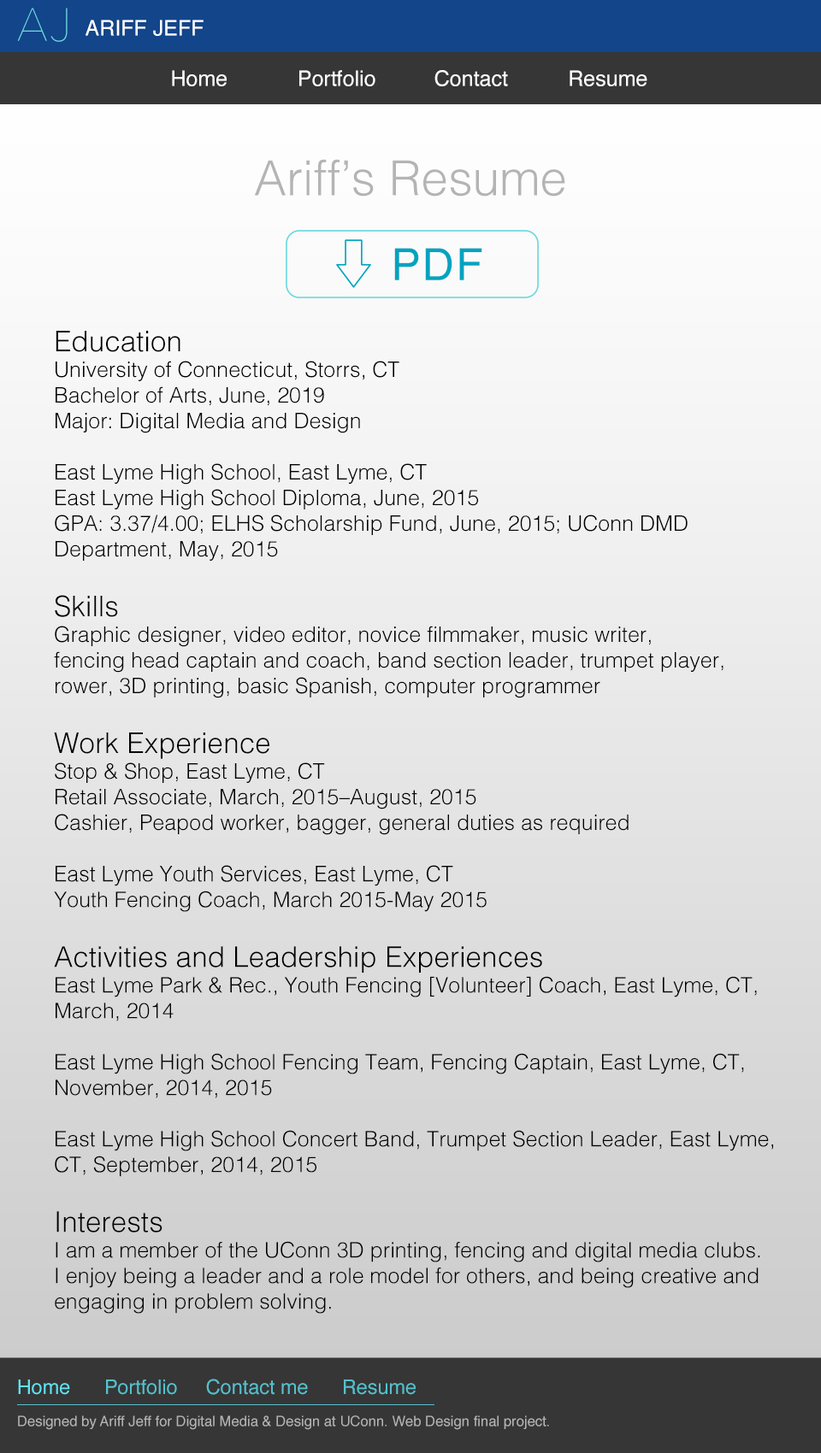
<style>
.page{position:relative;width:821px;height:1453px}
.page>*{position:absolute;margin:0}
.t1{font:46.1px "AvenirNext-UltraLight";letter-spacing:0.04em;color:#6cd8df}
.t2{font:21.4px "Helvetica";color:#ffffff}
.t3{font:48.5px "Helvetica-Light";color:#b4b4b4}
.t4{font:44.3px "Helvetica";letter-spacing:0.04em;color:#00a3c0}
.t5{font:21.4px "Helvetica-Light";color:#000000}
.t6{font:28.5px "Helvetica-Light";color:#000000}
.t7{font:20px "Helvetica";color:#5fe2f1}
.t8{font:20px "Helvetica";color:#55c0cd}
.t9{font:14.2px "Helvetica";color:#b4b4b4}
</style>
<div class="page">
<p class="t1" style="left:17px;top:8px;width:51px;height:34px">AJ</p>
<p class="t2" style="left:85px;top:20px;width:118px;height:16px">ARIFF JEFF</p>
<p class="t2" style="left:172px;top:70px;width:55px;height:16px">Home</p>
<p class="t2" style="left:299px;top:70px;width:76px;height:16px">Portfolio</p>
<p class="t2" style="left:434px;top:70px;width:74px;height:16px">Contact</p>
<p class="t2" style="left:569px;top:70px;width:78px;height:16px">Resume</p>
<p class="t3" style="left:254px;top:159px;width:311px;height:38px">Ariff’s Resume</p>
<p class="t4" style="left:394px;top:248px;width:88px;height:32px">PDF</p>
<p class="t5" style="left:54px;top:331px;width:719px;height:983px"><span class="t6">Education<br></span>University of Connecticut, Storrs, CT<br>Bachelor of Arts, June, 2019<br>Major: Digital Media and Design<br><br>East Lyme High School, East Lyme, CT<br>East Lyme High School Diploma, June, 2015<br>GPA: 3.37/4.00; ELHS Scholarship Fund, June, 2015; UConn DMD <br>Department, May, 2015<br><br><span class="t6">Skills<br></span>Graphic designer, video editor, novice filmmaker, music writer, <br>fencing head captain and coach, band section leader, trumpet player, <br>rower, 3D printing, basic Spanish, computer programmer<br><br><span class="t6">Work Experience<br></span>Stop &amp; Shop, East Lyme, CT<br>Retail Associate, March, 2015–August, 2015<br>Cashier, Peapod worker, bagger, general duties as required<br><br>East Lyme Youth Services, East Lyme, CT<br>Youth Fencing Coach, March 2015-May 2015<br><br><span class="t6">Activities and Leadership Experiences<br></span>East Lyme Park &amp; Rec., Youth Fencing [Volunteer] Coach, East Lyme, CT, <br>March, 2014<br><br>East Lyme High School Fencing Team, Fencing Captain, East Lyme, CT,<br>November, 2014, 2015<br><br>East Lyme High School Concert Band, Trumpet Section Leader, East Lyme,<br>CT, September, 2014, 2015<br><br><span class="t6">Interests<br></span>I am a member of the UConn 3D printing, fencing and digital media clubs.<br>I enjoy being a leader and a role model for others, and being creative and <br>engaging in problem solving.</p>
<p class="t7" style="left:18px;top:1380px;width:52px;height:15px">Home</p>
<p class="t8" style="left:106px;top:1380px;width:71px;height:15px">Portfolio</p>
<p class="t8" style="left:206px;top:1379px;width:102px;height:16px">Contact me</p>
<p class="t8" style="left:344px;top:1380px;width:71px;height:15px">Resume</p>
<p class="t9" style="left:18px;top:1416px;width:531px;height:14px">Designed by Ariff Jeff for Digital Media &amp; Design at UConn. Web Design final project.</p>
</div>
